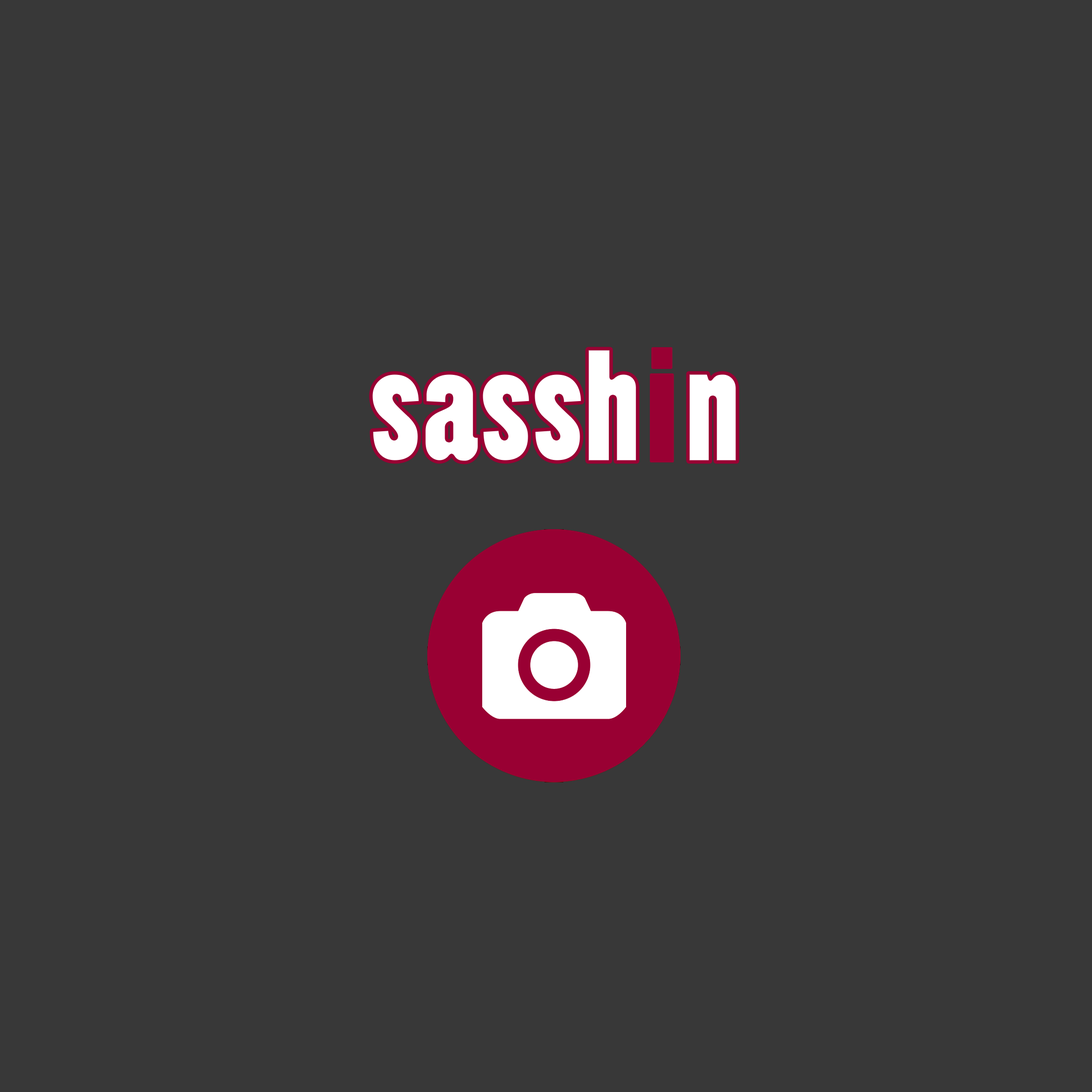
<style>
.page{position:relative;width:1092px;height:1092px;background:#383838}
.page>*{position:absolute;margin:0}
.t1{font:148.4px "PoplarStd";color:#ffffff}
.t2{font:148.4px "PoplarStd";color:#990033}
</style>
<div class="page">
<p class="t1" style="left:371px;top:349px;width:366px;height:113px">sassh   n</p>
<p class="t2" style="left:650px;top:347px;width:24px;height:115px">i</p>
</div>
